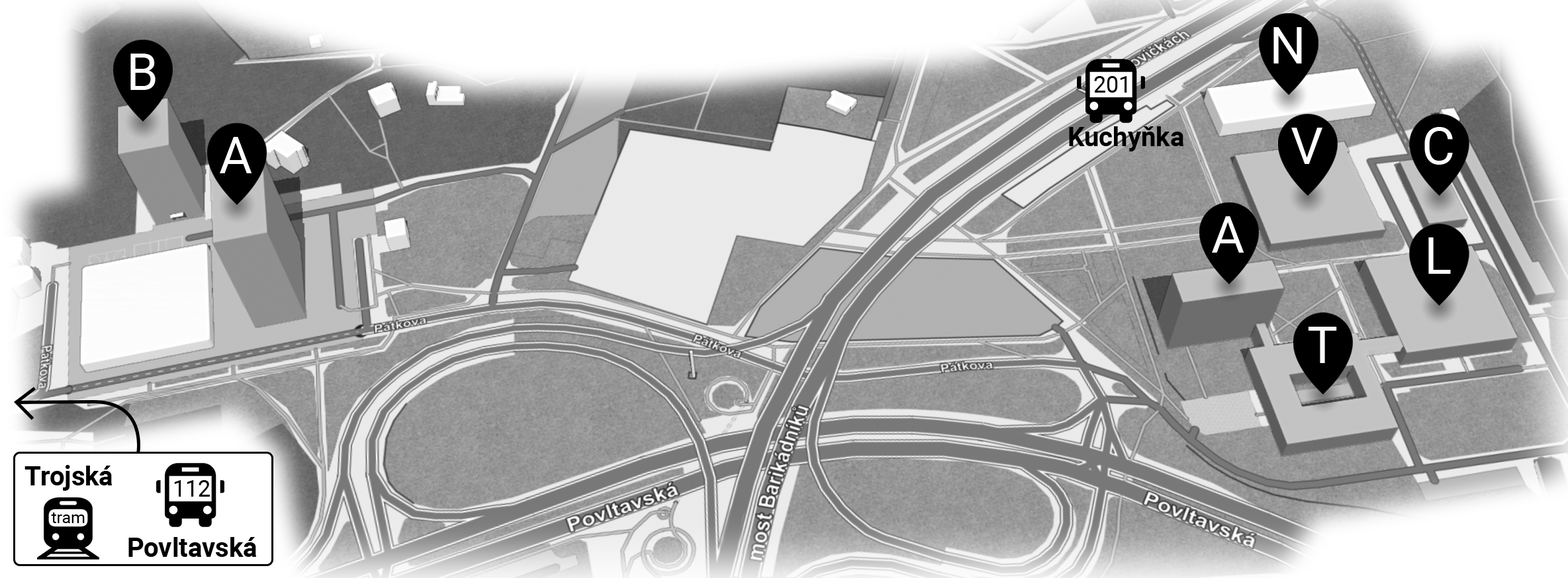
<style>
.page{position:relative;width:1568px;height:578px}
.page>*{position:absolute;margin:0}
.t1{font:50.8px "Roboto-Regular";color:#fefefe}
.t2{font:23.2px "Roboto-Regular";color:#000000}
.t3{font:26.5px "Roboto-Bold";color:#000000}
</style>
<div class="page">
<p class="t1" style="left:1273px;top:27px;width:29px;height:37px">N</p>
<p class="t1" style="left:130px;top:54px;width:26px;height:36px">B</p>
<p class="t2" style="left:1094px;top:76px;width:33px;height:17px">201</p>
<p class="t1" style="left:220px;top:137px;width:32px;height:36px">A</p>
<p class="t3" style="left:1069px;top:126px;width:115px;height:26px">Kuchyňka</p>
<p class="t1" style="left:1291px;top:128px;width:31px;height:36px">V</p>
<p class="t1" style="left:1424px;top:127px;width:29px;height:38px">C</p>
<p class="t1" style="left:1212px;top:216px;width:32px;height:37px">A</p>
<p class="t1" style="left:1428px;top:238px;width:23px;height:36px">L</p>
<p class="t1" style="left:1308px;top:327px;width:29px;height:36px">T</p>
<p class="t3" style="left:24px;top:465px;width:89px;height:26px">Trojská</p>
<p class="t2" style="left:174px;top:481px;width:36px;height:16px">112</p>
<p class="t3" style="left:128px;top:537px;width:129px;height:20px">Povltavská</p>
</div>
